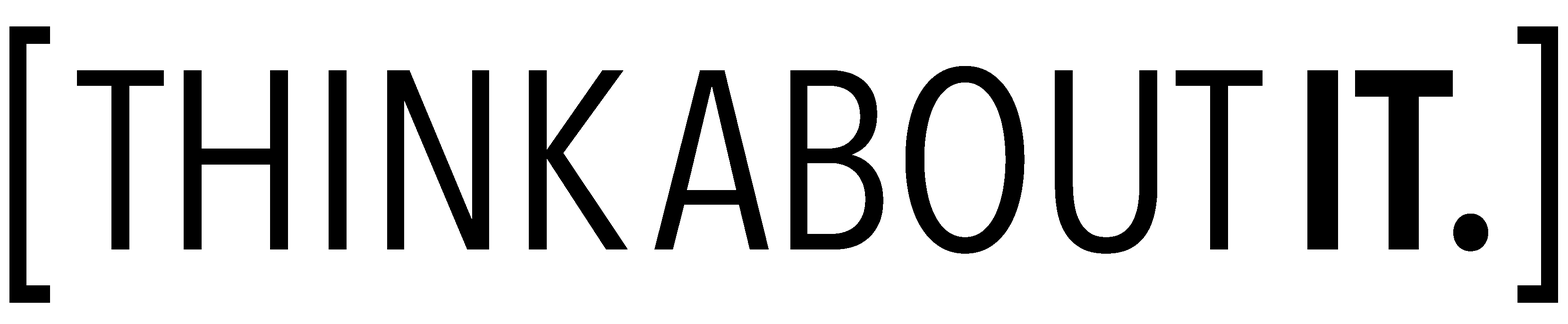
<style>
.page{position:relative;width:1568px;height:324px;background:#ffffff}
.page>*{position:absolute;margin:0}
.t1{font:310.6px "AvenirNextCondensed-Regular";color:#000000;scale:0.81 1}
.t2{font:252.4px "AvenirNextCondensed-Regular";color:#000000}
.t3{font:252.4px "AvenirNextCondensed-DemiBold";color:#000000}
</style>
<div class="page">
<p class="t1" style="left:9px;top:26px;width:41px;height:277px">[</p>
<p class="t1" style="left:1517px;top:26px;width:41px;height:277px;rotate:180deg">[</p>
<p class="t2" style="left:77px;top:70px;width:550px;height:180px">THINK</p>
<p class="t2" style="left:654px;top:66px;width:609px;height:188px">ABOUT</p>
<p class="t3" style="left:1307px;top:70px;width:181px;height:182px">IT.</p>
</div>
